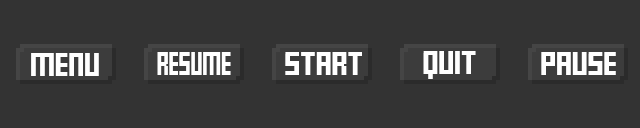
<style>
.page{position:relative;width:640px;height:128px;background:#333333}
.page>*{position:absolute;margin:0}
.t1{font:18px "FFFForward";color:#ffffff}
.t2{font:18px "FFFForward";color:#ffffff;scale:0.75 1}
</style>
<div class="page">
<p class="t1" style="left:31px;top:53px;width:68px;height:23px">MENU</p>
<p class="t2" style="left:157px;top:52px;width:74px;height:23px">RESUME</p>
<p class="t1" style="left:285px;top:52px;width:77px;height:23px">START</p>
<p class="t1" style="left:423px;top:51px;width:53px;height:28px">QUIT</p>
<p class="t1" style="left:541px;top:52px;width:75px;height:23px">PAUSE</p>
</div>
